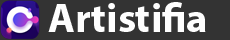
<style>
.page{position:relative;width:230px;height:40px;background:#333333}
.page>*{position:absolute;margin:0}
.t1{font:41.3px "MyriadPro-Bold";color:#fefefe}
</style>
<div class="page">
<p class="t1" style="left:48px;top:2px;width:158px;height:30px">Artistifia</p>
</div>
